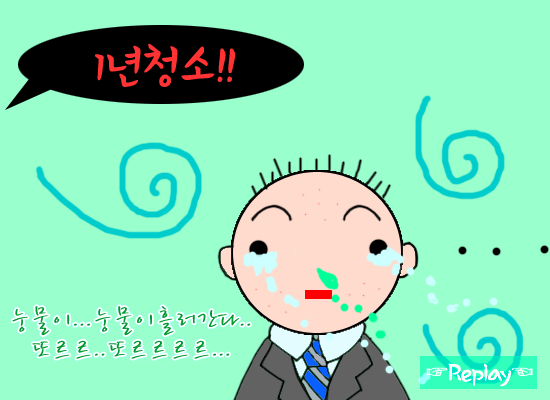
<style>
.page{position:relative;width:550px;height:400px;background:#99ffcc}
.page>*{position:absolute;margin:0}
.t1{font:48px "SachunM";letter-spacing:-0.1em;color:#ff3333}
.t2{font:30px/30px "YDBomnalM";color:#009933}
.t3{font:30px "SachunM";letter-spacing:-0.1em;color:#ffffff}
</style>
<div class="page">
<p class="t1" style="left:95px;top:43px;width:141px;height:44px">1년청소!!</p>
<p class="t2" style="left:12px;top:306px;width:239px;height:53px;text-align:center">눙물이...눙물이흘러간다..<br>또르르..또르르르르...</p>
<p class="t3" style="left:426px;top:363px;width:107px;height:24px">☞Replay☜</p>
</div>
